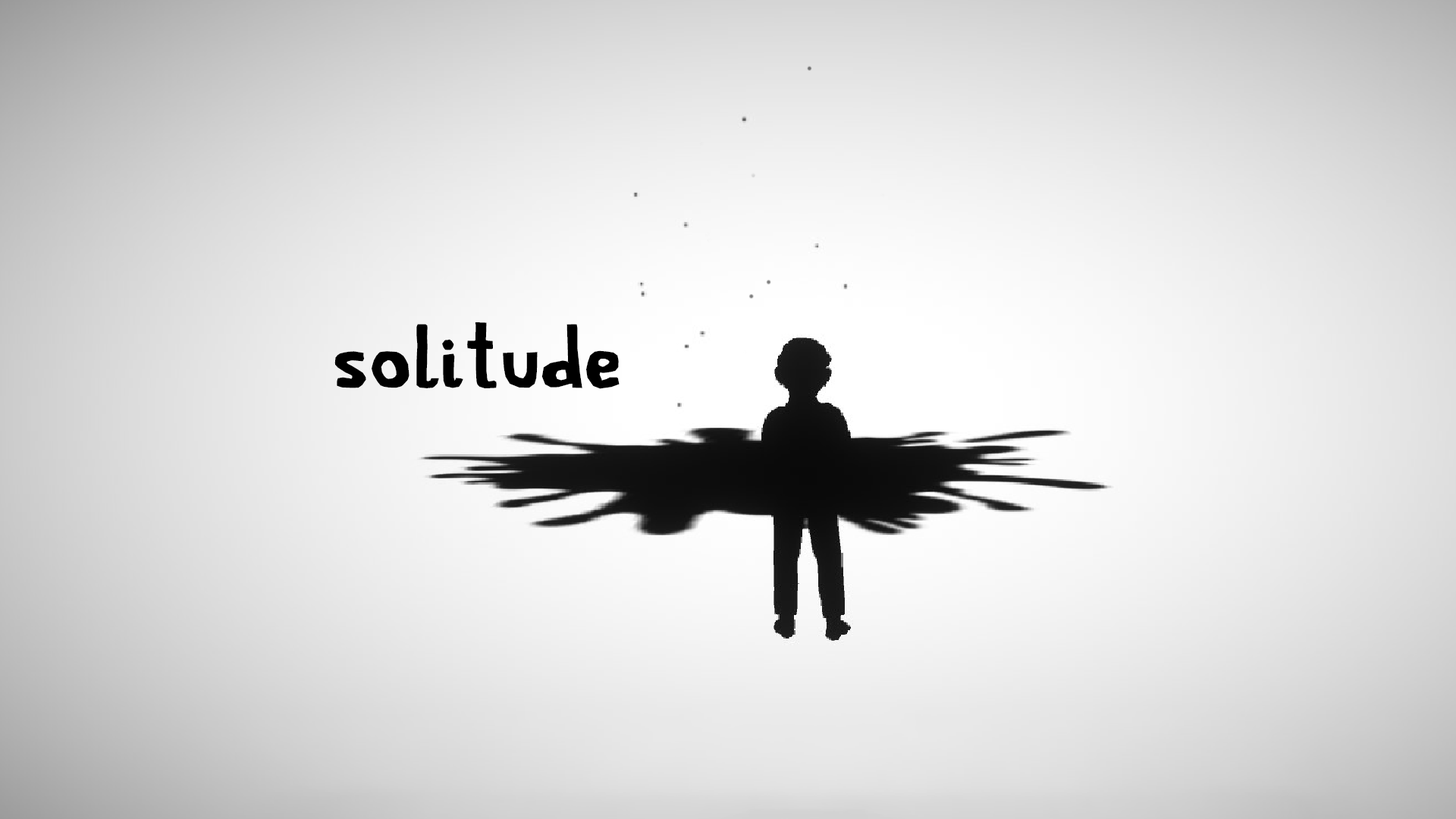
<style>
.page{position:relative;width:1456px;height:819px}
.page>*{position:absolute;margin:0}
.t1{font:72.8px "SimpleLife";letter-spacing:0.05em;color:#000000}
</style>
<div class="page">
<p class="t1" style="left:334px;top:322px;width:286px;height:67px">solitude</p>
</div>
